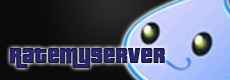
<style>
.page{position:relative;width:230px;height:80px}
.page>*{position:absolute;margin:0}
.t1{font:30px "Pricedown";color:#252264}
</style>
<div class="page">
<p class="t1" style="left:10px;top:48px;width:155px;height:20px">RateMyServer</p>
</div>
